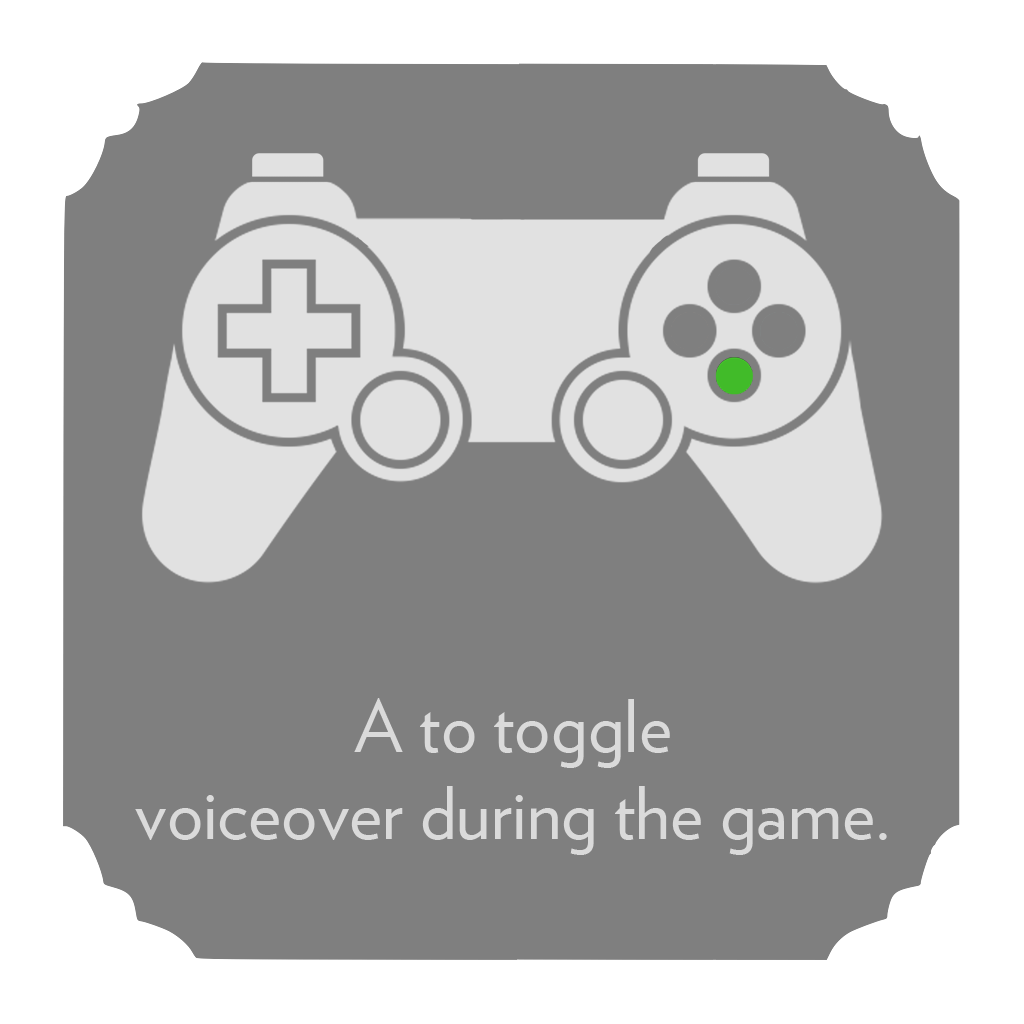
<style>
.page{position:relative;width:1024px;height:1024px;background:#7f7f7f}
.page>*{position:absolute;margin:0}
.t1{font:72px "Verlag-Book";color:#dadada}
</style>
<div class="page">
<p class="t1" style="left:135px;top:698px;width:752px;height:157px;text-align:center">A to toggle<br>voiceover during the game.</p>
</div>
